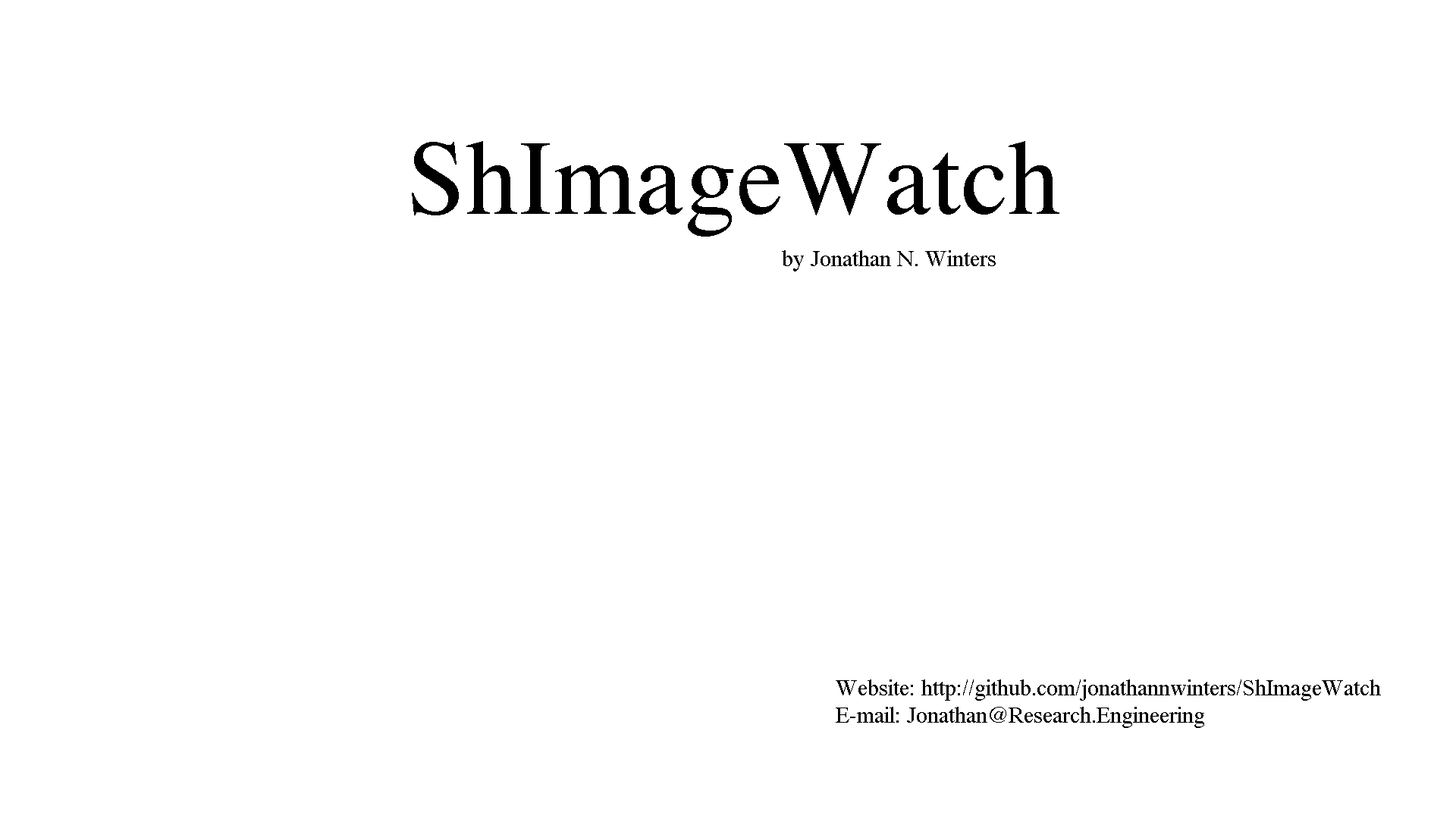
<style>
.page{position:relative;width:1456px;height:819px;background:#ffffff}
.page>*{position:absolute;margin:0}
.t1{font:106.2px "Times-Roman";color:#000000}
.t2{font:22.7px "Times-Roman";color:#000000}
</style>
<div class="page">
<p class="t1" style="left:412px;top:141px;width:647px;height:96px">ShImageWatch</p>
<p class="t2" style="left:782px;top:250px;width:214px;height:21px">by Jonathan N. Winters</p>
<p class="t2" style="left:836px;top:679px;width:545px;height:49px">Website: http://github.com/jonathannwinters/ShImageWatch<br>E-mail: Jonathan@Research.Engineering</p>
</div>
